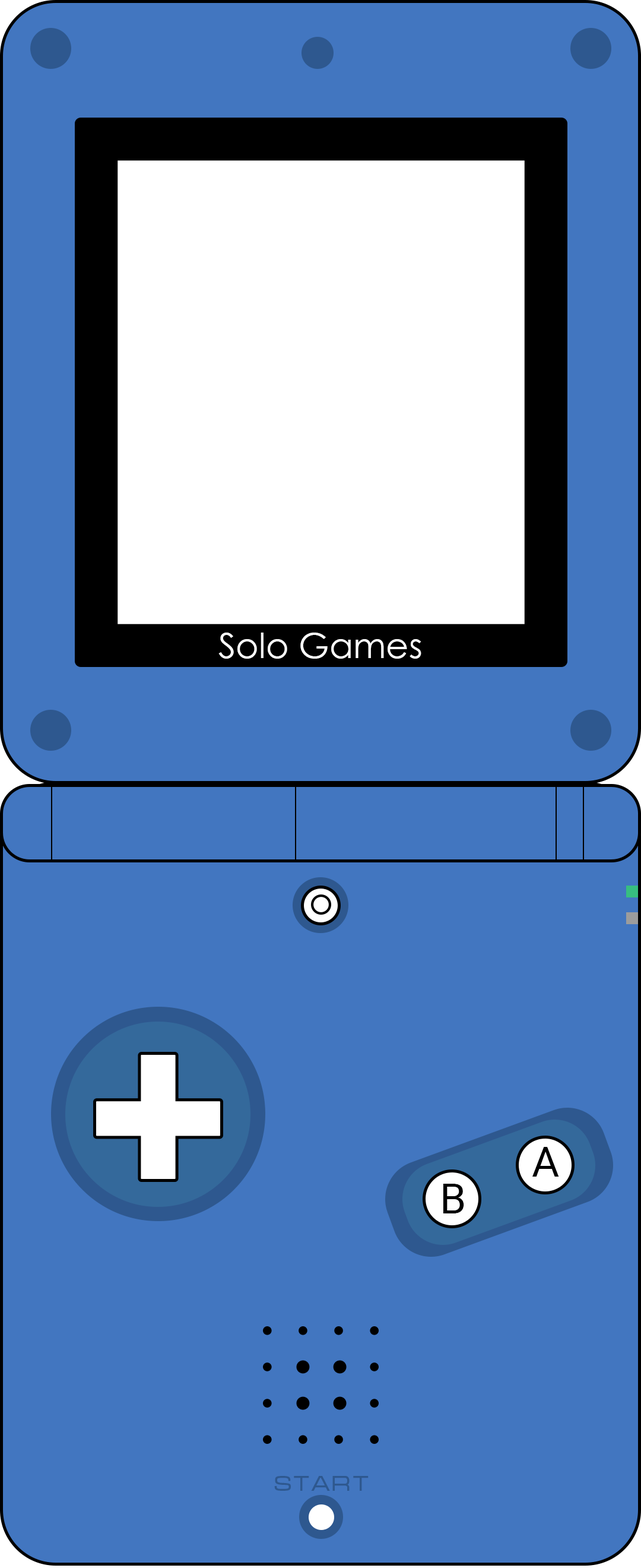
<style>
.page{position:relative;width:641px;height:1568px;background:#4276c0}
.page>*{position:absolute;margin:0}
.t1{font:42.2px "Roboto-Regular";color:#000000}
.t2{font:21.1px "MicraC";letter-spacing:0.04em;color:#2e588f}
</style>
<div class="page">
<p class="t1" style="left:533px;top:1147px;width:26px;height:30px">A</p>
<p class="t1" style="left:443px;top:1184px;width:21px;height:29px">B</p>
<p class="t2" style="left:274px;top:1476px;width:95px;height:15px">Start</p>
</div>
